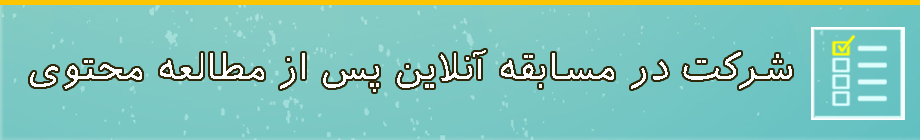
<style>
.page{position:relative;width:920px;height:140px}
.page>*{position:absolute;margin:0}
.t1{font:37.1px "IranianSans";color:#fdfdfd}
</style>
<div class="page">
<p class="t1" style="left:30px;top:50px;width:762px;height:42px">شرکت در مسابقه آنلاین پس از مطالعه محتوی</p>
</div>
